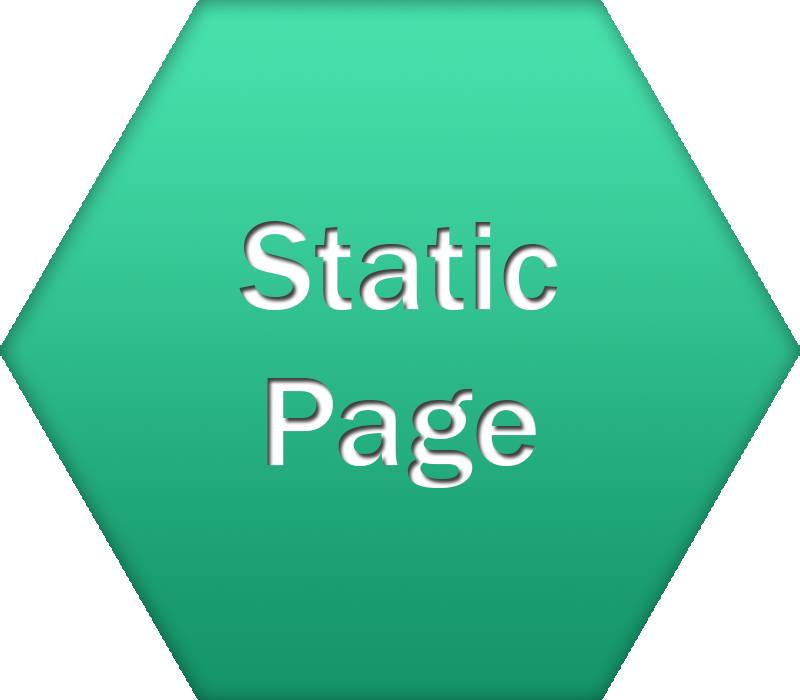
<style>
.page{position:relative;width:800px;height:700px;background:#ffffff}
.page>*{position:absolute;margin:0}
.t1{font:130px "FranklinGothic-Medium"}
</style>
<div class="page">
<p class="t1" style="left:239px;top:221px;width:319px;height:267px;text-align:center">Static<br>Page</p>
</div>
